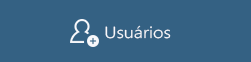
<style>
.page{position:relative;width:251px;height:62px;background:#346183}
.page>*{position:absolute;margin:0}
.t1{font:16px "SegoeUI-Semilight";color:#f8f8fb;scale:1.13 1}
</style>
<div class="page">
<p class="t1" style="left:105px;top:25px;width:66px;height:14px">Usuários</p>
</div>
